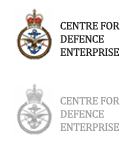
<style>
.page{position:relative;width:138px;height:151px;background:#ffffff}
.page>*{position:absolute;margin:0}
.t1{font:11px "Cambria";letter-spacing:-0.025em;color:#272727}
</style>
<div class="page">
<p class="t1" style="left:60px;top:21px;width:60px;height:35px">CENTRE FOR<br>DEFENCE<br>ENTERPRISE</p>
</div>
